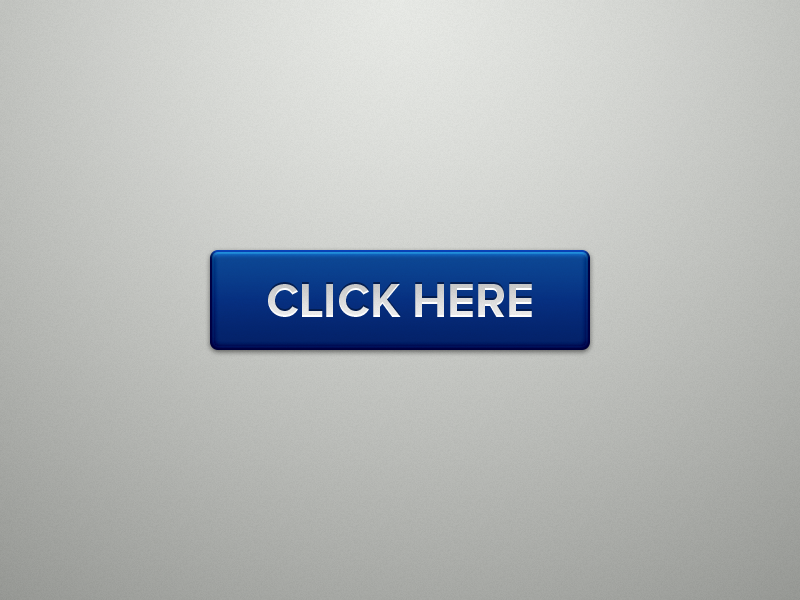
<style>
.page{position:relative;width:800px;height:600px}
.page>*{position:absolute;margin:0}
.t1{font:48px "ProximaNova-Bold";color:#d5d5d5}
</style>
<div class="page">
<p class="t1" style="left:268px;top:282px;width:264px;height:33px">CLICK HERE</p>
</div>
